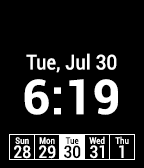
<style>
.page{position:relative;width:144px;height:168px;background:#000000}
.page>*{position:absolute;margin:0}
.t1{font:20.4px "Roboto-Condensed";letter-spacing:0.01em;color:#ffffff}
.t2{font:47.9px "Roboto-Bold";letter-spacing:0.01em;color:#ffffff}
.t3{font:9px "Roboto-Condensed";letter-spacing:0.01em;color:#ffffff}
.t4{font:9px "Roboto-Condensed";letter-spacing:0.01em;color:#000000}
.t5{font:17px "Roboto-Condensed";letter-spacing:0.01em;color:#ffffff}
.t6{font:17px "Roboto-Condensed";letter-spacing:0.01em;color:#000000}
</style>
<div class="page">
<p class="t1" style="left:26px;top:53px;width:91px;height:20px">Tue, Jul 30</p>
<p class="t2" style="left:24px;top:79px;width:94px;height:36px">6:19</p>
<p class="t3" style="left:15px;top:137px;width:14px;height:7px">Sun</p>
<p class="t3" style="left:39px;top:137px;width:16px;height:7px">Mon</p>
<p class="t4" style="left:65px;top:137px;width:14px;height:7px">Tue</p>
<p class="t3" style="left:89px;top:136px;width:16px;height:8px">Wed</p>
<p class="t3" style="left:115px;top:136px;width:14px;height:8px">Thu</p>
<p class="t5" style="left:14px;top:145px;width:17px;height:14px">28</p>
<p class="t5" style="left:39px;top:145px;width:17px;height:14px">29</p>
<p class="t6" style="left:64px;top:145px;width:17px;height:14px">30</p>
<p class="t5" style="left:90px;top:145px;width:14px;height:14px">31</p>
<p class="t5" style="left:119px;top:145px;width:5px;height:13px">1</p>
</div>
